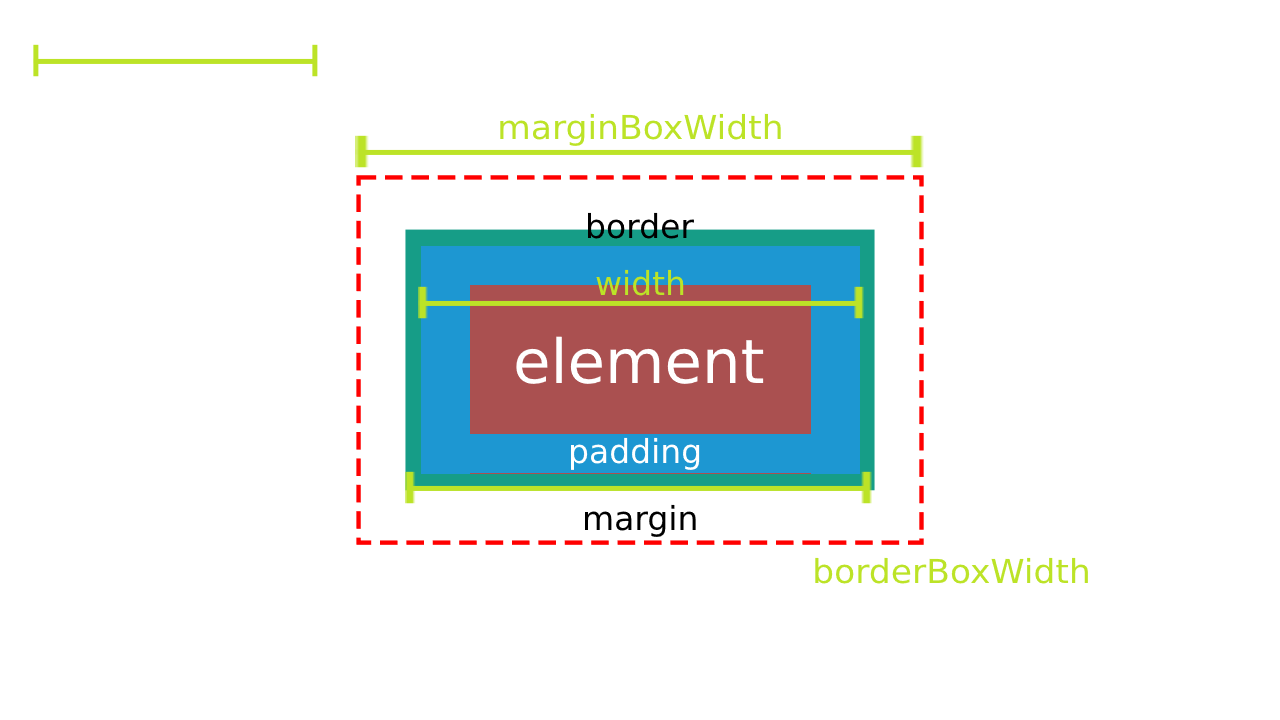
<style>
.page{position:relative;width:1280px;height:720px;background:#ffffff}
.page>*{position:absolute;margin:0}
.t1{font:33px "DejaVuSans";color:#bce327;scale:1.05 1}
.t2{font:33px "DejaVuSans";color:#000000}
.t3{font:33px "DejaVuSans";color:#bce327}
.t4{font:33px "DejaVuSans";color:#ffffff}
</style>
<div class="page">
<p class="t1" style="left:500px;top:113px;width:281px;height:33px">marginBoxWidth</p>
<p class="t2" style="left:587px;top:212px;width:107px;height:27px">border</p>
<p class="t3" style="left:596px;top:269px;width:88px;height:27px">width</p>
<p class="t4" style="left:570px;top:437px;width:130px;height:33px">padding</p>
<p class="t2" style="left:584px;top:504px;width:112px;height:33px">margin</p>
<p class="t1" style="left:815px;top:557px;width:273px;height:27px">borderBoxWidth</p>
</div>
